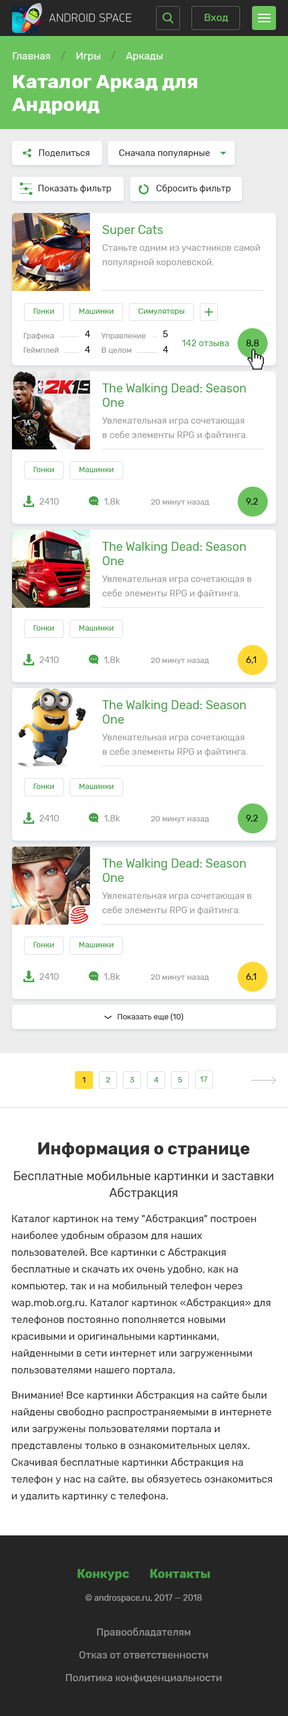
<style>
.page{position:relative;width:288px;height:1716px;background:#ffffff}
.page>*{position:absolute;margin:0}
.t1{font:10.2px "Rubik-Regular";color:#6bc35e}
.t2{font:19.2px/14.4px "Rubik-Bold";color:#ffffff}
.t3{font:10.2px/14.4px "Rubik-Regular";color:#ffffff}
.t4{font:10.2px/14.4px "Rubik-Regular";color:#4c9141}
.t5{font:19.2px "Rubik-Bold";color:#ffffff}
.t6{font:9px "Rubik-Regular";color:#272727}
.t7{font:9px/14.4px "Rubik-Regular";color:#999999}
.t8{font:12px/14.4px "Rubik-Regular";color:#46a148}
.t9{font:7.8px "Rubik-Regular";color:#46a148}
.t10{font:7.8px "Rubik-Regular";color:#999999}
.t11{font:9px "Rubik-Regular";color:#000000}
.t12{font:9px "Rubik-Regular";color:#46a148}
.t13{font:9px "Rubik-Regular";color:#999999}
.t14{font:7.8px "Rubik-Regular";color:#333333}
.t15{font:7.8px "Rubik-Regular";color:#000000}
.t16{font:10.2px/16.8px "Rubik-Regular";color:#333333}
.t17{font:16.8px "Rubik-Bold";color:#333333}
.t18{font:12px/16.8px "Rubik-Regular";color:#333333}
.t19{font:10.2px/16.8px "Rubik-Regular";color:#999999}
.t20{font:12px/16.8px "Rubik-Bold";color:#46a148}
.t21{font:8.4px/16.8px "Rubik-Regular";color:#999999}
</style>
<div class="page">
<p class="t1" style="left:205px;top:14px;width:23px;height:8px">Вход</p>
<p class="t2" style="left:12px;top:51px;width:185px;height:64px"><span class="t3">Главная    </span><span class="t4">/</span><span class="t3">    Игры    </span><span class="t4">/</span><span class="t3">    Аркады<br></span>Каталог Аркад для<br><span class="t5">Андроид</span></p>
<p class="t6" style="left:39px;top:149px;width:50px;height:8px">Поделиться</p>
<p class="t6" style="left:119px;top:149px;width:91px;height:9px">Сначала популярные</p>
<p class="t6" style="left:38px;top:185px;width:73px;height:8px">Показать фильтр</p>
<p class="t6" style="left:156px;top:184px;width:75px;height:9px">Сбросить фильтр</p>
<p class="t7" style="left:103px;top:225px;width:157px;height:42px"><span class="t8">Super Cats<br></span>Станьте одним из участников самой популярной королевской.</p>
<p class="t9" style="left:34px;top:308px;width:20px;height:6px">Гонки</p>
<p class="t9" style="left:79px;top:308px;width:34px;height:6px">Машинки</p>
<p class="t9" style="left:138px;top:308px;width:46px;height:7px">Симуляторы</p>
<p class="t10" style="left:23px;top:333px;width:36px;height:20px">Графика<br>Геймплей</p>
<p class="t11" style="left:85px;top:331px;width:6px;height:22px">4<br>4</p>
<p class="t10" style="left:101px;top:333px;width:45px;height:21px">Управление<br>В целом</p>
<p class="t11" style="left:163px;top:331px;width:6px;height:22px">5<br>4</p>
<p class="t12" style="left:182px;top:340px;width:47px;height:6px">142 отзыва</p>
<p class="t11" style="left:246px;top:340px;width:13px;height:7px">8,8</p>
<p class="t7" style="left:102px;top:383px;width:146px;height:57px"><span class="t8">The Walking Dead: Season One<br></span>Увлекательная игра сочетающая   в себе элементы RPG и файтинга.</p>
<p class="t9" style="left:34px;top:467px;width:20px;height:5px">Гонки</p>
<p class="t9" style="left:79px;top:467px;width:34px;height:5px">Машинки</p>
<p class="t13" style="left:39px;top:498px;width:20px;height:7px">2410</p>
<p class="t13" style="left:104px;top:498px;width:16px;height:7px">1,8k</p>
<p class="t10" style="left:151px;top:499px;width:58px;height:7px">20 минут назад</p>
<p class="t11" style="left:246px;top:498px;width:12px;height:7px">9,2</p>
<p class="t7" style="left:102px;top:542px;width:149px;height:56px"><span class="t8">The Walking Dead: Season One<br></span>Увлекательная игра сочетающая в себе элементы RPG и файтинга.</p>
<p class="t9" style="left:34px;top:625px;width:20px;height:6px">Гонки</p>
<p class="t9" style="left:79px;top:625px;width:34px;height:6px">Машинки</p>
<p class="t13" style="left:39px;top:656px;width:20px;height:7px">2410</p>
<p class="t13" style="left:104px;top:656px;width:16px;height:8px">1,8k</p>
<p class="t10" style="left:151px;top:658px;width:58px;height:6px">20 минут назад</p>
<p class="t11" style="left:246px;top:656px;width:10px;height:8px">6,1</p>
<p class="t7" style="left:102px;top:700px;width:146px;height:57px"><span class="t8">The Walking Dead: Season One<br></span>Увлекательная игра сочетающая   в себе элементы RPG и файтинга.</p>
<p class="t9" style="left:34px;top:784px;width:20px;height:5px">Гонки</p>
<p class="t9" style="left:79px;top:784px;width:34px;height:5px">Машинки</p>
<p class="t13" style="left:39px;top:815px;width:20px;height:6px">2410</p>
<p class="t13" style="left:104px;top:815px;width:16px;height:7px">1,8k</p>
<p class="t10" style="left:151px;top:816px;width:58px;height:7px">20 минут назад</p>
<p class="t11" style="left:246px;top:815px;width:12px;height:7px">9,2</p>
<p class="t7" style="left:102px;top:859px;width:149px;height:56px"><span class="t8">The Walking Dead: Season One<br></span>Увлекательная игра сочетающая в себе элементы RPG и файтинга.</p>
<p class="t9" style="left:34px;top:942px;width:20px;height:5px">Гонки</p>
<p class="t9" style="left:79px;top:942px;width:34px;height:5px">Машинки</p>
<p class="t13" style="left:39px;top:973px;width:20px;height:7px">2410</p>
<p class="t13" style="left:104px;top:973px;width:16px;height:7px">1,8k</p>
<p class="t10" style="left:151px;top:974px;width:58px;height:7px">20 минут назад</p>
<p class="t11" style="left:246px;top:973px;width:10px;height:7px">6,1</p>
<p class="t14" style="left:118px;top:1013px;width:66px;height:8px">Показать еще (10)</p>
<p class="t15" style="left:82px;top:1077px;width:3px;height:5px">1</p>
<p class="t9" style="left:106px;top:1077px;width:4px;height:5px">2</p>
<p class="t9" style="left:130px;top:1077px;width:4px;height:5px">3</p>
<p class="t9" style="left:154px;top:1077px;width:4px;height:5px">4</p>
<p class="t9" style="left:178px;top:1077px;width:4px;height:5px">5</p>
<p class="t9" style="left:200px;top:1076px;width:8px;height:6px">17</p>
<p class="t16" style="left:11px;top:1142px;width:263px;height:359px;text-align:center"><span class="t17">Информация о странице<br></span><span class="t18">Бесплатные мобильные картинки и заставки Абстракция<br></span>Каталог картинок на тему "Абстракция" построен наиболее удобным образом для наших пользователей. Все картинки с Абстракция бесплатные и скачать их очень удобно, как на компьютер, так и на мобильный телефон через wap.mob.org.ru. Каталог картинок «Абстракция» для телефонов постоянно пополняется новыми красивыми и оригинальными картинками, найденными в сети интернет или загруженными пользователями нашего портала.<br>Внимание! Все картинки Абстракция на сайте были найдены свободно распространяемыми в интернете или загружены пользователями портала и представлены только в ознакомительных целях. Скачивая бесплатные картинки Абстракция на телефон у нас на сайте, вы обязуетесь ознакомиться и удалить картинку с телефона.</p>
<p class="t19" style="left:66px;top:1569px;width:155px;height:114px;text-align:center"><span class="t20">Конкурс        Контакты<br></span><span class="t21">© androspace.ru, 2017 — 2018<br></span>Правообладателям<br>Отказ от ответственности<br>Политика конфиденциальности</p>
</div>
